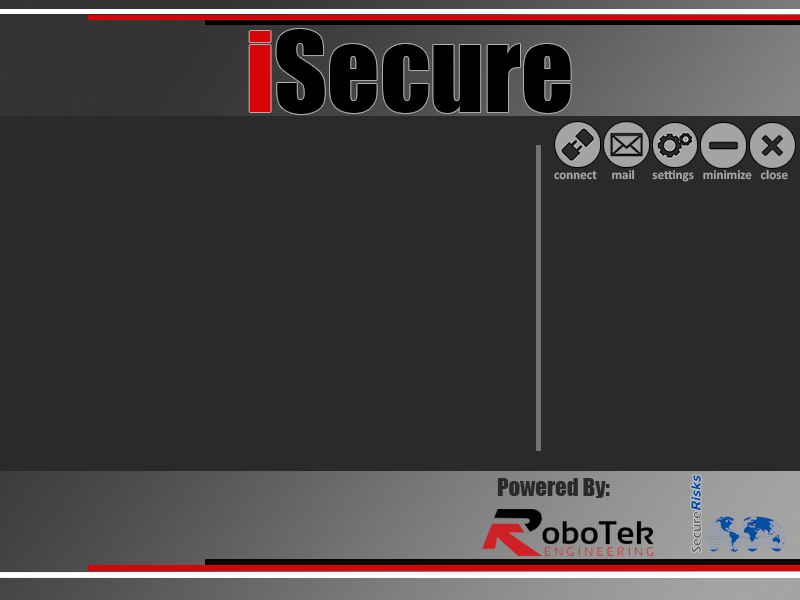
<style>
.page{position:relative;width:800px;height:600px;background:#2a2a2a}
.page>*{position:absolute;margin:0}
.t1{font:102.8px "Impact";color:#000000}
.t2{font:102.8px "Impact";color:#d80307}
.t3{font:13.4px "Calibri-Bold";color:#a4a4a4}
.t4{font:22.8px "Impact";color:#2a2a2a}
</style>
<div class="page">
<p class="t1" style="left:249px;top:29px;width:322px;height:85px"><span class="t2">i</span>Secure</p>
<p class="t3" style="left:554px;top:169px;width:234px;height:13px">connect     mail      settings   minimize   close</p>
<p class="t4" style="left:497px;top:478px;width:113px;height:20px">:Powered By</p>
</div>
